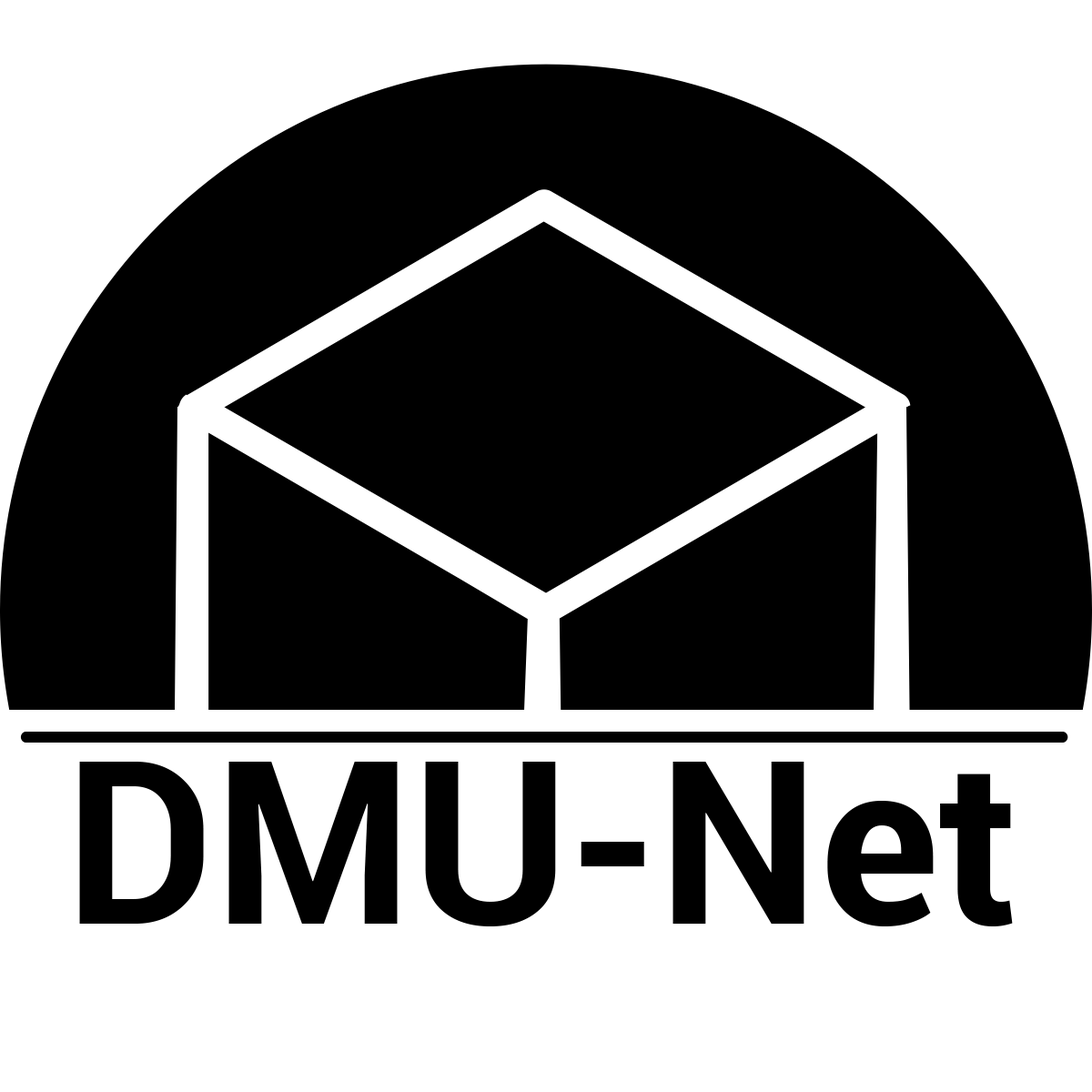
<style>
.page{position:relative;width:1092px;height:1092px;background:#ffffff}
.page>*{position:absolute;margin:0}
.t1{font:227.5px "Roboto-Bold";color:#000000}
</style>
<div class="page">
<p class="t1" style="left:79px;top:762px;width:934px;height:164px">DMU-Net</p>
</div>
